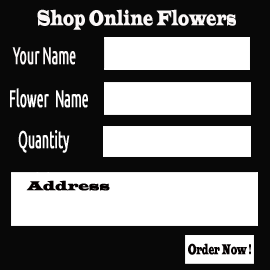
<style>
.page{position:relative;width:270px;height:270px;background:#080808}
.page>*{position:absolute;margin:0}
.t1{font:37.5px "LatinWide";color:#fbf8f8;font-weight:bold;scale:0.5 1}
.t2{font:41.7px "Ubuntu";color:#fbf8f8;font-weight:bold;scale:0.5 1}
.t3{font:33.3px "SansSerifCollection";color:#fbf8f8;font-weight:bold;scale:0.5 1}
.t4{font:41.7px "Ubuntu";color:#ffffff;font-weight:bold;scale:0.5 1}
.t5{font:22.9px "LatinWide";color:#040000;font-weight:bold;scale:0.86 1}
.t6{font:25.2px "LatinWide";color:#040000;font-weight:bold;scale:0.42 1}
</style>
<div class="page">
<p class="t1" style="left:37px;top:9px;width:199px;height:21px">Shop Online Flowers</p>
<p class="t2" style="left:12px;top:47px;width:64px;height:18px"><span class="t3">y</span>Your Name</p>
<p class="t4" style="left:10px;top:88px;width:78px;height:20px">Flower  Name</p>
<p class="t4" style="left:18px;top:130px;width:52px;height:23px">Quantity</p>
<p class="t5" style="left:26px;top:180px;width:84px;height:11px">Address</p>
<p class="t6" style="left:188px;top:243px;width:63px;height:12px">Order Now !</p>
</div>
